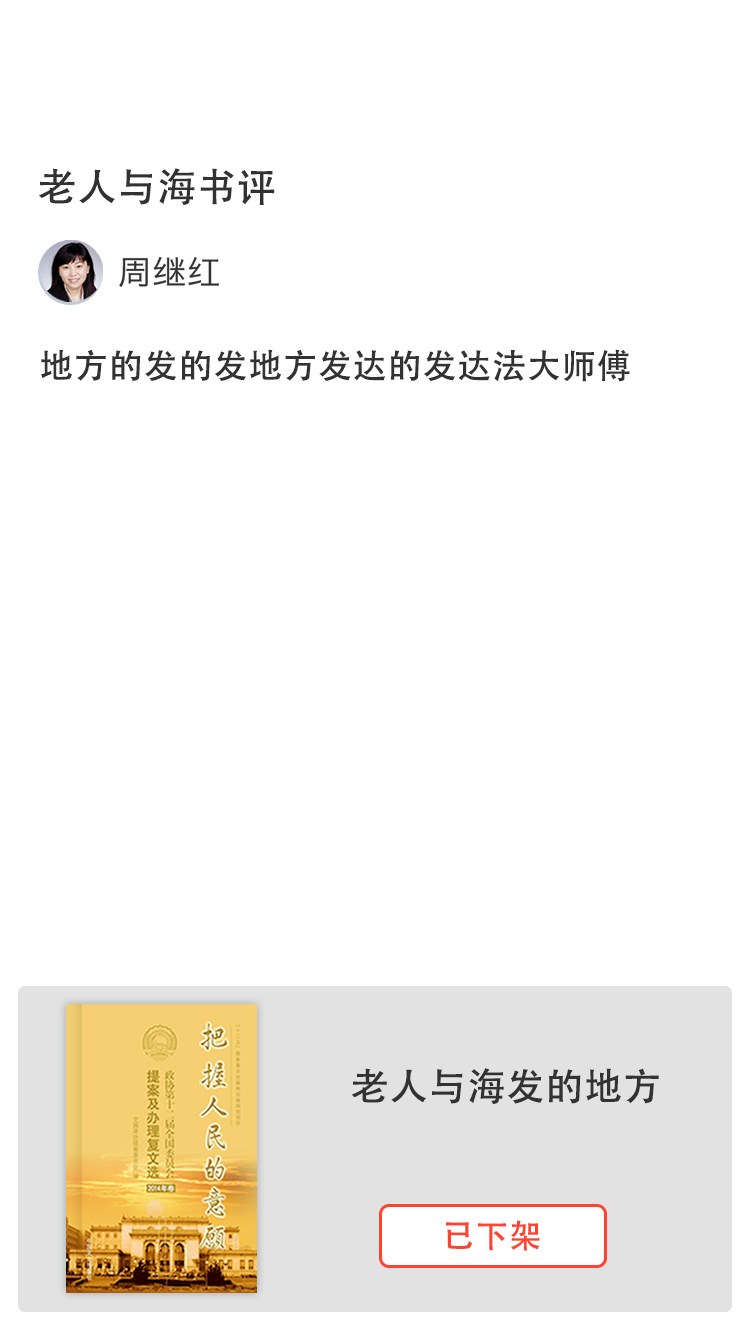
<style>
.page{position:relative;width:750px;height:1334px;background:#ffffff}
.page>*{position:absolute;margin:0}
.t1{font:38.9px "AdobeHeitiStd-Regular";letter-spacing:0.025em;color:#323232}
.t2{font:33.2px "HiraginoSansGB-W3";letter-spacing:0.025em;color:#323232}
.t3{font:34px "AdobeHeitiStd-Regular";letter-spacing:0.025em;color:#323232}
.t4{font:38px "AdobeHeitiStd-Regular";letter-spacing:0.025em;color:#323232}
.t5{font:32.4px "AdobeHeitiStd-Regular";letter-spacing:0.025em;color:#fe4431}
</style>
<div class="page">
<p class="t1" style="left:39px;top:168px;width:236px;height:37px">老人与海书评</p>
<p class="t2" style="left:119px;top:257px;width:100px;height:30px">周继红</p>
<p class="t3" style="left:41px;top:349px;width:589px;height:33px">地方的发的发地方发达的发达法大师傅</p>
<p class="t4" style="left:352px;top:1068px;width:307px;height:37px">老人与海发的地方</p>
<p class="t5" style="left:446px;top:1220px;width:94px;height:31px">已下架</p>
</div>
